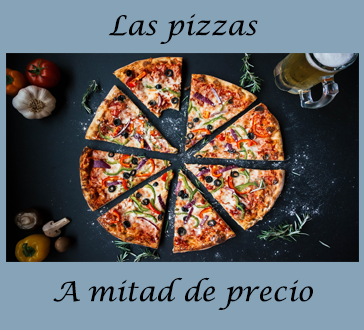
<style>
.page{position:relative;width:364px;height:330px;background:#86a3b8}
.page>*{position:absolute;margin:0}
.t1{font:27px "LucidaCalligraphy-Italic";color:#000000}
</style>
<div class="page">
<p class="t1" style="left:108px;top:13px;width:150px;height:31px">Las pizzas</p>
<p class="t1" style="left:53px;top:277px;width:260px;height:33px">A mitad de precio</p>
</div>
